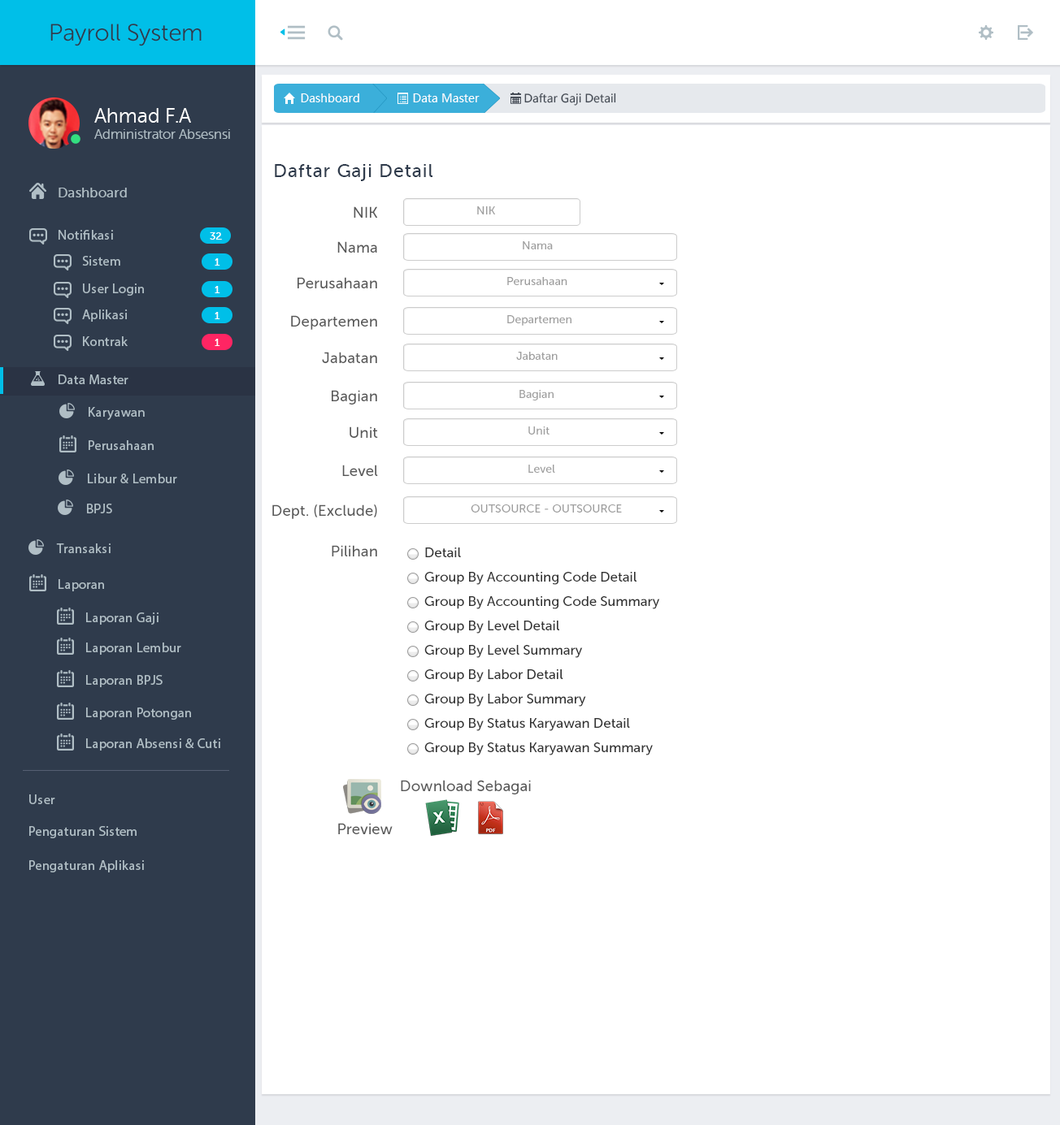
<style>
.page{position:relative;width:1060px;height:1125px;background:#ffffff}
.page>*{position:absolute;margin:0}
.t1{font:23.7px "MuseoSansRounded-300";color:#2f3b4c}
.t2{font:11.4px "MicrosoftYaHei";color:#ffffff}
.t3{font:11.2px "MicrosoftYaHei";color:#434a54}
.t4{font:13.5px "MuseoSansRounded-300";color:#b0bec5}
.t5{font:20.3px "MuseoSansRounded-300";color:#ffffff}
.t6{font:18.6px "MuseoSans-500";letter-spacing:0.04em;color:#2f3b4c}
.t7{font:13.5px "MuseoSans-500";letter-spacing:0.02em;color:#b0bec5}
.t8{font:15.2px "MuseoSans-500";color:#585858}
.t9{font:11.4px "MuseoSans-500";color:#9e9e9e}
.t10{font:13.5px "MyriadPro-Regular";letter-spacing:0.02em;color:#b0bec5}
.t11{font:10.2px "MuseoSans-500";letter-spacing:0.02em;color:#ffffff}
.t12{font:13.5px "MuseoSans-500";color:#333333}
</style>
<div class="page">
<p class="t1" style="left:50px;top:24px;width:152px;height:22px">Payroll System</p>
<p class="t2" style="left:301px;top:93px;width:58px;height:9px">Dashboard</p>
<p class="t2" style="left:413px;top:93px;width:66px;height:9px">Data Master</p>
<p class="t3" style="left:524px;top:93px;width:92px;height:13px">Daftar Gaji Detail</p>
<p class="t4" style="left:94px;top:108px;width:136px;height:31px"><span class="t5">Ahmad F.A<br></span>Administrator Absesnsi</p>
<p class="t6" style="left:275px;top:164px;width:157px;height:17px">Daftar Gaji Detail</p>
<p class="t7" style="left:59px;top:188px;width:68px;height:9px">Dashboard</p>
<p class="t8" style="left:353px;top:206px;width:25px;height:12px">NIK</p>
<p class="t9" style="left:477px;top:206px;width:18px;height:9px">NIK</p>
<p class="t10" style="left:59px;top:230px;width:54px;height:10px">Notifikasi</p>
<p class="t11" style="left:210px;top:232px;width:12px;height:8px">32</p>
<p class="t8" style="left:337px;top:241px;width:40px;height:12px">Nama</p>
<p class="t9" style="left:522px;top:241px;width:31px;height:8px">Nama</p>
<p class="t10" style="left:82px;top:256px;width:38px;height:10px">Sistem</p>
<p class="t11" style="left:215px;top:258px;width:5px;height:8px">1</p>
<p class="t8" style="left:297px;top:277px;width:80px;height:11px">Perusahaan</p>
<p class="t9" style="left:507px;top:277px;width:60px;height:8px">Perusahaan</p>
<p class="t10" style="left:83px;top:284px;width:61px;height:12px">User Login</p>
<p class="t11" style="left:215px;top:286px;width:5px;height:7px">1</p>
<p class="t10" style="left:82px;top:310px;width:46px;height:12px">Aplikasi</p>
<p class="t11" style="left:215px;top:312px;width:5px;height:7px">1</p>
<p class="t8" style="left:291px;top:315px;width:86px;height:15px">Departemen</p>
<p class="t9" style="left:507px;top:315px;width:64px;height:11px">Departemen</p>
<p class="t10" style="left:83px;top:336px;width:45px;height:10px">Kontrak</p>
<p class="t11" style="left:215px;top:339px;width:5px;height:7px">1</p>
<p class="t8" style="left:322px;top:352px;width:55px;height:11px">Jabatan</p>
<p class="t9" style="left:516px;top:352px;width:41px;height:8px">Jabatan</p>
<p class="t10" style="left:59px;top:375px;width:69px;height:9px">Data Master</p>
<p class="t8" style="left:332px;top:390px;width:45px;height:15px">Bagian</p>
<p class="t9" style="left:519px;top:390px;width:34px;height:11px">Bagian</p>
<p class="t10" style="left:89px;top:407px;width:56px;height:13px">Karyawan</p>
<p class="t8" style="left:349px;top:427px;width:29px;height:11px">Unit</p>
<p class="t9" style="left:528px;top:427px;width:21px;height:8px">Unit</p>
<p class="t10" style="left:89px;top:440px;width:65px;height:10px">Perusahaan</p>
<p class="t10" style="left:88px;top:474px;width:89px;height:9px">Libur &amp; Lembur</p>
<p class="t8" style="left:342px;top:465px;width:36px;height:11px">Level</p>
<p class="t9" style="left:528px;top:465px;width:27px;height:8px">Level</p>
<p class="t10" style="left:87px;top:504px;width:25px;height:10px">BPJS</p>
<p class="t8" style="left:272px;top:505px;width:105px;height:14px">Dept. (Exclude)</p>
<p class="t9" style="left:470px;top:505px;width:152px;height:8px">OUTSOURCE - OUTSOURCE</p>
<p class="t10" style="left:56px;top:544px;width:55px;height:9px">Transaksi</p>
<p class="t8" style="left:332px;top:545px;width:45px;height:12px">Pilihan</p>
<p class="t12" style="left:425px;top:548px;width:36px;height:9px">Detail</p>
<p class="t10" style="left:59px;top:579px;width:45px;height:13px">Laporan</p>
<p class="t12" style="left:424px;top:572px;width:212px;height:13px">Group By Accounting Code Detail</p>
<p class="t12" style="left:424px;top:596px;width:236px;height:13px">Group By Accounting Code Summary</p>
<p class="t10" style="left:86px;top:613px;width:72px;height:12px">Laporan Gaji</p>
<p class="t12" style="left:424px;top:621px;width:135px;height:13px">Group By Level Detail</p>
<p class="t10" style="left:86px;top:643px;width:95px;height:12px">Laporan Lembur</p>
<p class="t12" style="left:424px;top:645px;width:159px;height:13px">Group By Level Summary</p>
<p class="t10" style="left:86px;top:675px;width:77px;height:12px">Laporan BPJS</p>
<p class="t12" style="left:424px;top:670px;width:139px;height:13px">Group By Labor Detail</p>
<p class="t12" style="left:424px;top:694px;width:162px;height:13px">Group By Labor Summary</p>
<p class="t10" style="left:86px;top:708px;width:105px;height:12px">Laporan Potongan</p>
<p class="t12" style="left:424px;top:718px;width:206px;height:13px">Group By Status Karyawan Detail</p>
<p class="t10" style="left:86px;top:739px;width:134px;height:12px">Laporan Absensi &amp; Cuti</p>
<p class="t12" style="left:424px;top:743px;width:228px;height:13px">Group By Status Karyawan Summary</p>
<p class="t8" style="left:401px;top:780px;width:130px;height:15px">Download Sebagai</p>
<p class="t10" style="left:29px;top:795px;width:26px;height:9px">User</p>
<p class="t10" style="left:29px;top:826px;width:108px;height:13px">Pengaturan Sistem</p>
<p class="t8" style="left:338px;top:823px;width:54px;height:11px">Preview</p>
<p class="t10" style="left:29px;top:860px;width:115px;height:13px">Pengaturan Aplikasi</p>
</div>
